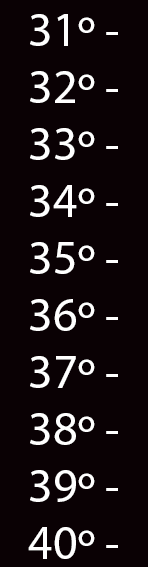
<style>
.page{position:relative;width:148px;height:567px;background:#0a0104}
.page>*{position:absolute;margin:0}
.t1{font:48px "MyriadPro-Regular";color:#ffffff}
</style>
<div class="page">
<p class="t1" style="left:30px;top:14px;width:88px;height:32px">31º -</p>
<p class="t1" style="left:30px;top:71px;width:88px;height:32px">32º -</p>
<p class="t1" style="left:30px;top:128px;width:88px;height:32px">33º -</p>
<p class="t1" style="left:30px;top:185px;width:88px;height:32px">34º -</p>
<p class="t1" style="left:30px;top:242px;width:88px;height:32px">35º -</p>
<p class="t1" style="left:30px;top:299px;width:88px;height:32px">36º -</p>
<p class="t1" style="left:30px;top:356px;width:88px;height:32px">37º -</p>
<p class="t1" style="left:30px;top:413px;width:88px;height:32px">38º -</p>
<p class="t1" style="left:30px;top:470px;width:88px;height:32px">39º -</p>
<p class="t1" style="left:28px;top:527px;width:90px;height:32px">40º -</p>
</div>
